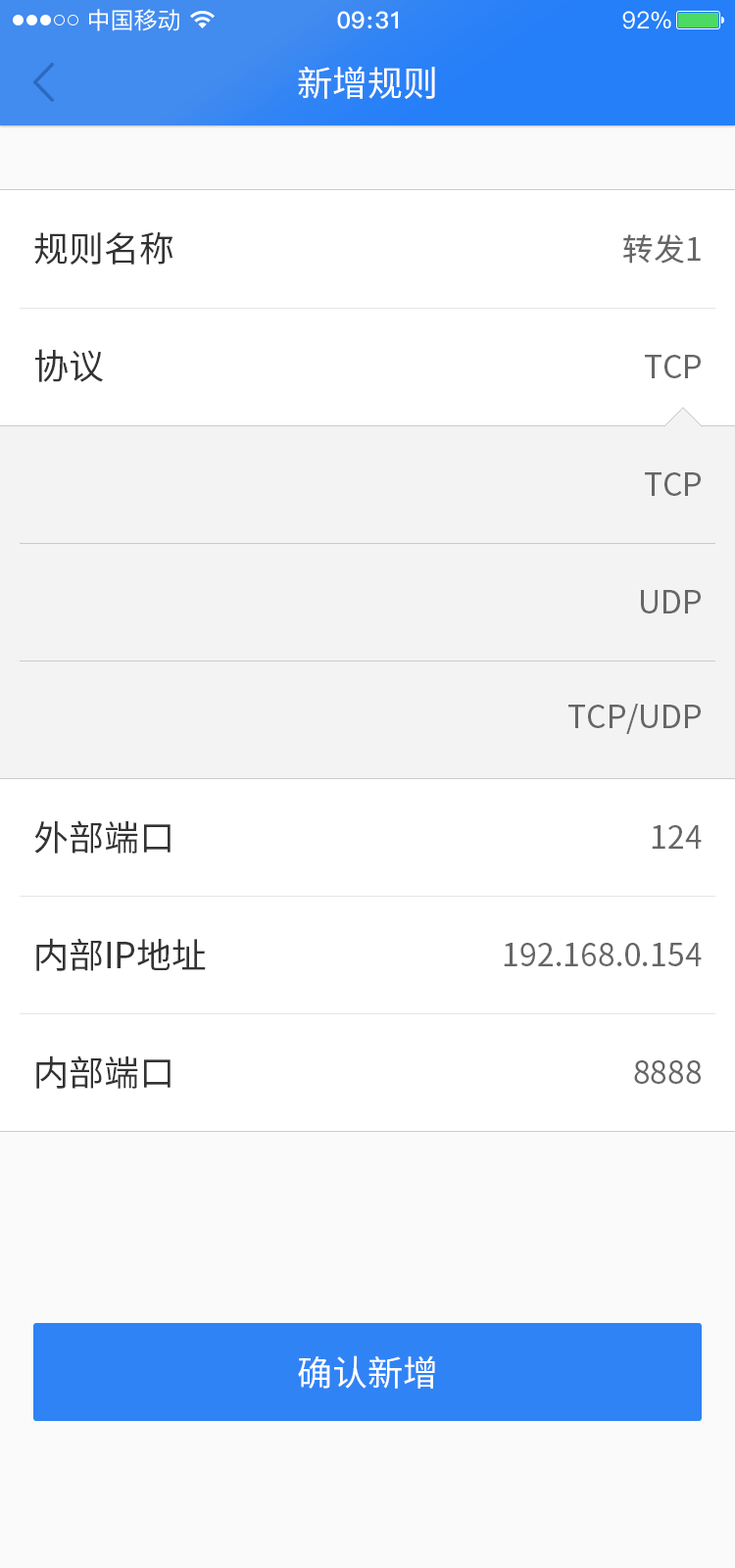
<style>
.page{position:relative;width:735px;height:1568px;background:#ffffff}
.page>*{position:absolute;margin:0}
.t1{font:35.3px "SourceHanSansCN-Regular";color:#ffffff}
.t2{font:35.3px "SourceHanSansCN-Regular";color:#333333}
.t3{font:31.4px "SourceHanSansCN-Regular";color:#666666}
</style>
<div class="page">
<p class="t1" style="left:298px;top:66px;width:137px;height:33px">新增规则</p>
<p class="t2" style="left:34px;top:231px;width:139px;height:34px">规则名称</p>
<p class="t3" style="left:623px;top:234px;width:78px;height:30px">转发1</p>
<p class="t2" style="left:35px;top:349px;width:68px;height:33px">协议</p>
<p class="t3" style="left:645px;top:355px;width:56px;height:23px">TCP</p>
<p class="t3" style="left:645px;top:472px;width:56px;height:24px">TCP</p>
<p class="t3" style="left:641px;top:590px;width:60px;height:23px">UDP</p>
<p class="t3" style="left:568px;top:704px;width:133px;height:30px">TCP/UDP</p>
<p class="t2" style="left:34px;top:820px;width:137px;height:34px">外部端口</p>
<p class="t3" style="left:652px;top:825px;width:50px;height:24px">124</p>
<p class="t2" style="left:36px;top:938px;width:170px;height:33px">内部IP地址</p>
<p class="t3" style="left:504px;top:943px;width:198px;height:23px">192.168.0.154</p>
<p class="t2" style="left:36px;top:1055px;width:135px;height:34px">内部端口</p>
<p class="t3" style="left:634px;top:1060px;width:67px;height:24px">8888</p>
<p class="t1" style="left:298px;top:1355px;width:137px;height:34px">确认新增</p>
</div>
